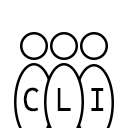
<style>
.page{position:relative;width:128px;height:128px;background:#ffffff}
.page>*{position:absolute;margin:0}
.t1{font:33.2px "CascadiaCode";color:#000000;scale:0.86 1}
</style>
<div class="page">
<p class="t1" style="left:23px;top:87px;width:81px;height:25px">C L I</p>
</div>
